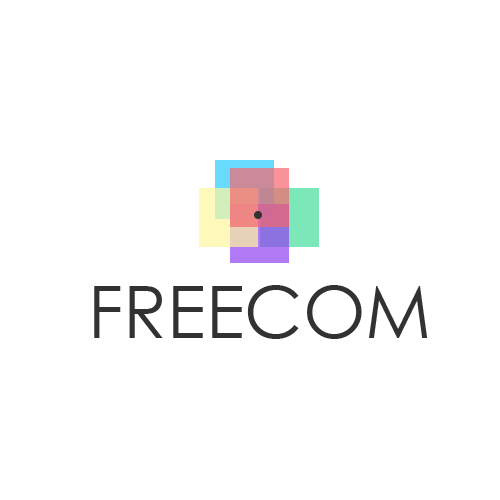
<style>
.page{position:relative;width:500px;height:500px;background:#ffffff}
.page>*{position:absolute;margin:0}
.t1{font:72px "CenturyGothic";color:#323232}
</style>
<div class="page">
<p class="t1" style="left:94px;top:285px;width:334px;height:54px">FREECOM</p>
</div>
